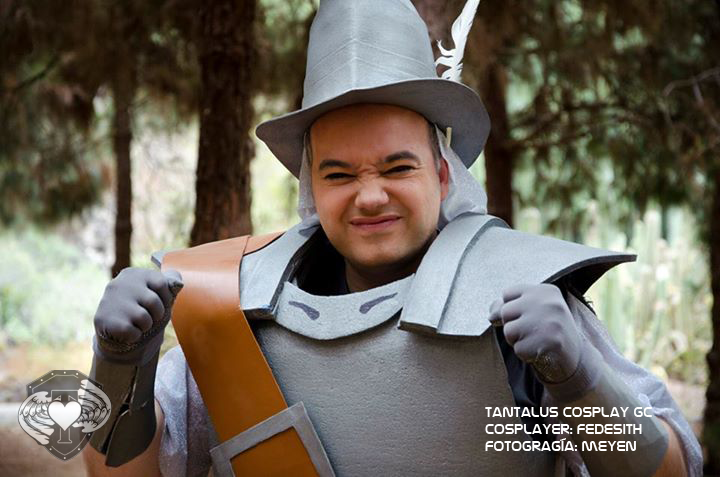
<style>
.page{position:relative;width:720px;height:477px}
.page>*{position:absolute;margin:0}
.t1{font:14px "NasalizationRg-Regular";color:#ffffff}
</style>
<div class="page">
<p class="t1" style="left:485px;top:407px;width:167px;height:44px">tantalus cosplay gc<br>cosplayer: fedesith<br>fotogragía: meyen</p>
</div>
